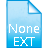
<style>
.page{position:relative;width:48px;height:48px;background:#ffffff}
.page>*{position:absolute;margin:0}
.t1{font:12.7px/12.7px "KhmerUI";color:#ffffff}
</style>
<div class="page">
<p class="t1" style="left:9px;top:24px;width:30px;height:22px;text-align:center">None<br>EXT</p>
</div>
